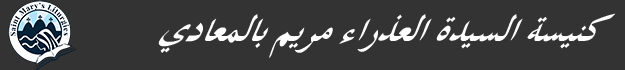
<style>
.page{position:relative;width:625px;height:70px;background:#333333}
.page>*{position:absolute;margin:0}
.t1{font:52.5px "TraditionalArabic-Bold";color:#ffffff;scale:0.84 1}
</style>
<div class="page">
<p class="t1" style="left:158px;top:13px;width:458px;height:45px">يﺩﺎﻌﻤﻟﺎﺑ ﻢﻳﺮﻣ ءاﺭﺬﻌﻟﺍ ةﺪﻴﺴﻟﺍ ﺔﺴﻴﻨﻛ</p>
</div>
